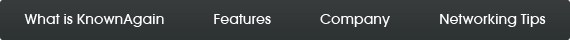
<style>
.page{position:relative;width:570px;height:40px}
.page>*{position:absolute;margin:0}
.t1{font:14px "AvantGardeLT-Medium";color:#ffffff}
</style>
<div class="page">
<p class="t1" style="left:24px;top:14px;width:140px;height:13px">What is KnownAgain</p>
<p class="t1" style="left:214px;top:14px;width:57px;height:10px">Features</p>
<p class="t1" style="left:320px;top:14px;width:70px;height:13px">Company</p>
<p class="t1" style="left:440px;top:14px;width:106px;height:13px">Networking Tips</p>
</div>
